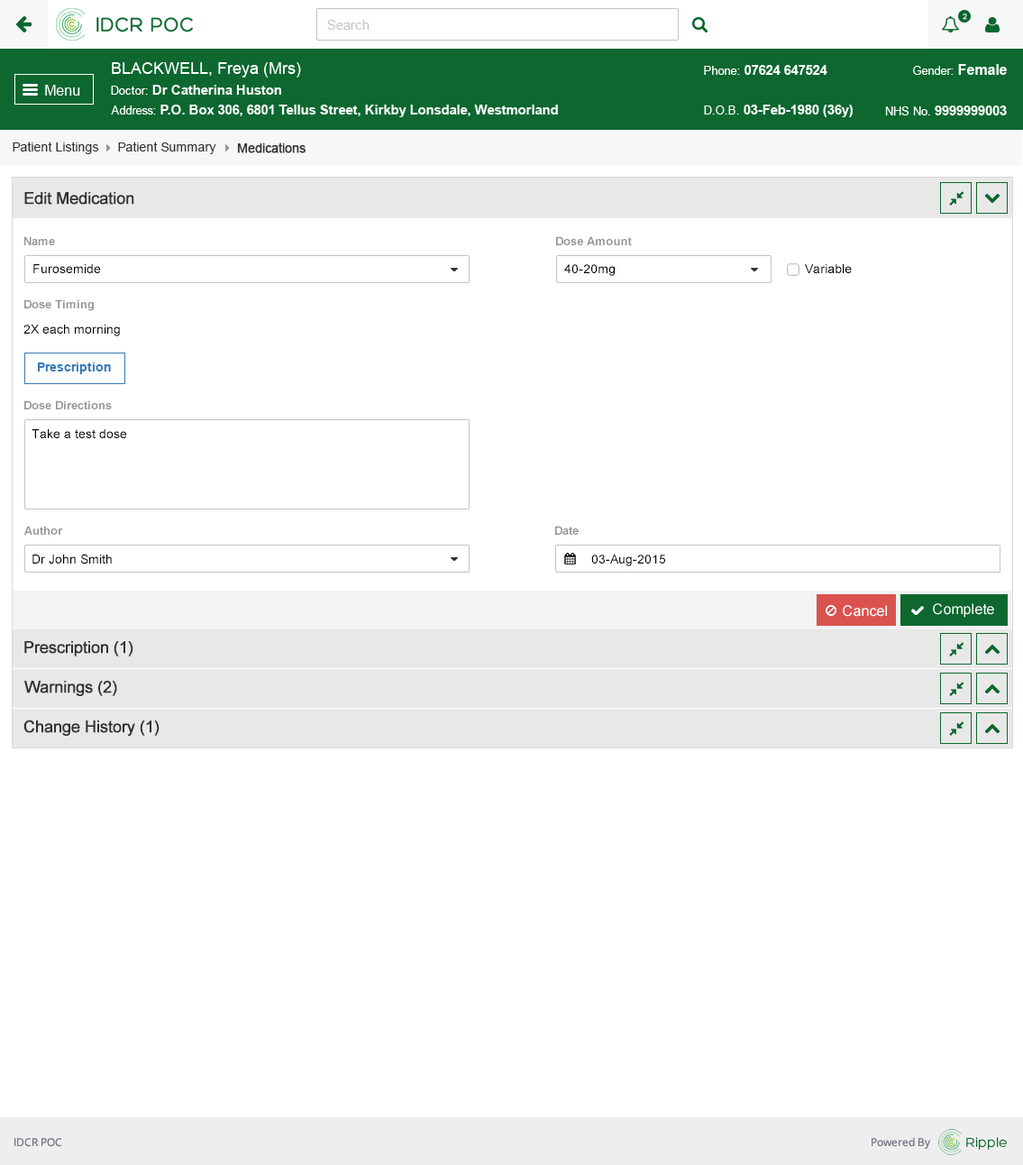
<style>
.page{position:relative;width:1023px;height:1165px;background:#ffffff}
.page>*{position:absolute;margin:0}
.t1{font:12.6px "ArialMT";color:#313131}
.t2{font:12.6px "ArialMT";color:#313131;font-weight:bold}
.t3{font:16.2px "ArialMT";color:#303030;font-weight:bold}
.t4{font:11.7px "Arial-BoldMT";color:#959595}
.t5{font:12.6px "ArialMT";color:#000000}
.t6{font:12.6px "Arial-BoldMT";color:#337ab7}
</style>
<div class="page">
<p class="t1" style="left:13px;top:142px;width:86px;height:12px">Patient Listings</p>
<p class="t1" style="left:118px;top:142px;width:98px;height:12px">Patient Summary</p>
<p class="t2" style="left:237px;top:142px;width:69px;height:11px">Medications</p>
<p class="t3" style="left:24px;top:192px;width:110px;height:13px">Edit Medication</p>
<p class="t4" style="left:24px;top:236px;width:31px;height:9px">Name</p>
<p class="t4" style="left:556px;top:236px;width:76px;height:9px">Dose Amount</p>
<p class="t5" style="left:33px;top:264px;width:68px;height:9px">Furosemide</p>
<p class="t5" style="left:564px;top:264px;width:51px;height:12px">40-20mg</p>
<p class="t5" style="left:805px;top:264px;width:47px;height:9px">Variable</p>
<p class="t4" style="left:24px;top:299px;width:70px;height:12px">Dose Timing</p>
<p class="t5" style="left:23px;top:325px;width:97px;height:11px">2X each morning</p>
<p class="t6" style="left:37px;top:363px;width:74px;height:11px">Prescription</p>
<p class="t4" style="left:24px;top:400px;width:88px;height:9px">Dose Directions</p>
<p class="t5" style="left:32px;top:429px;width:95px;height:9px">Take a test dose</p>
<p class="t4" style="left:24px;top:526px;width:39px;height:9px">Author</p>
<p class="t4" style="left:555px;top:526px;width:24px;height:9px">Date</p>
<p class="t5" style="left:32px;top:554px;width:80px;height:10px">Dr John Smith</p>
<p class="t5" style="left:592px;top:555px;width:73px;height:11px">03-Aug-2015</p>
<p class="t3" style="left:24px;top:641px;width:109px;height:15px">Prescription (1)</p>
<p class="t3" style="left:24px;top:681px;width:93px;height:15px">Warnings (2)</p>
<p class="t3" style="left:23px;top:720px;width:137px;height:16px">Change History (1)</p>
</div>
